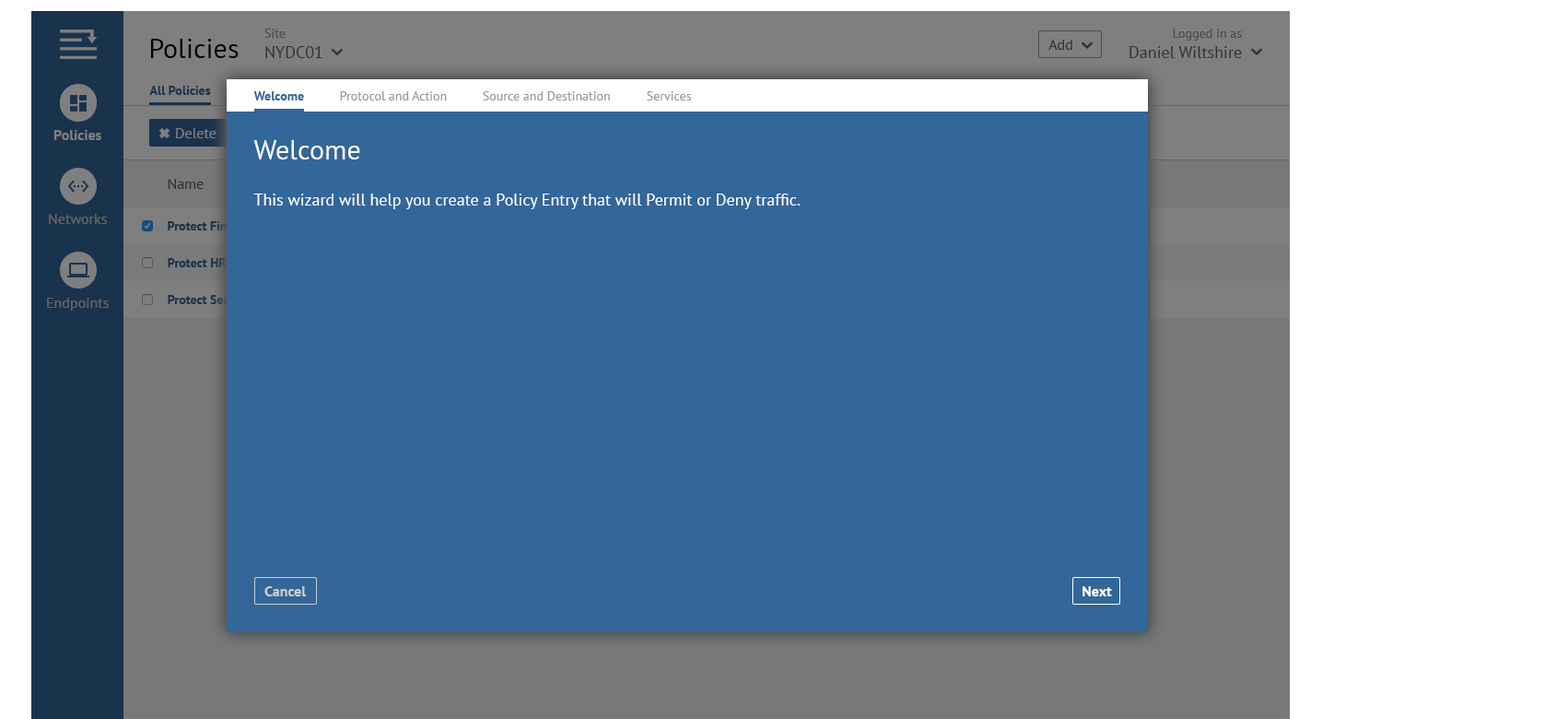
<style>
.page{position:relative;width:1568px;height:719px;background:#336699}
.page>*{position:absolute;margin:0}
.t1{font:16.6px "PTSans-Regular"}
.t2{font:12.9px "PTSans-Regular"}
.t3{font:16.8px "PTSans-Regular"}
.t4{font:13.1px "PTSans-Regular"}
.t5{font:27.6px "PTSans-Regular";color:#000000}
.t6{font:14.7px "PTSans-Regular";color:#333333}
.t7{font:12.8px "PTSans-Bold";color:#19334c}
.t8{font:12.8px "PTSans-Bold";color:#336699}
.t9{font:12.8px "PTSans-Regular";color:#999999}
.t10{font:14.7px "PTSans-Bold";color:#7f7f7f}
.t11{font:14.7px "PTSans-Regular";color:#7f7f7f}
.t12{font:27.6px "PTSans-Regular";color:#ffffff}
.t13{font:16.6px "PTSans-Regular";color:#ffffff}
.t14{font:14.7px "PTSans-Regular";color:#666666}
.t15{font:12.9px "PTSans-Bold"}
.t16{font:12.9px "PTSans-Bold";color:#19334c}
.t17{font:14.7px "PTSans-Bold";color:#cccccc}
.t18{font:14.7px "PTSans-Bold";color:#ffffff}
</style>
<div class="page">
<p class="t1" style="left:264px;top:29px;width:58px;height:29px"><span class="t2">Site<br></span>NYDC01</p>
<p class="t3" style="left:1129px;top:29px;width:113px;height:29px;text-align:right"><span class="t4">Logged in as<br></span>Daniel Wiltshire</p>
<p class="t5" style="left:151px;top:39px;width:88px;height:19px">Policies</p>
<p class="t6" style="left:1048px;top:40px;width:24px;height:10px">Add</p>
<p class="t7" style="left:149px;top:86px;width:62px;height:9px">All Policies</p>
<p class="t8" style="left:253px;top:91px;width:51px;height:9px">Welcome</p>
<p class="t9" style="left:340px;top:91px;width:107px;height:9px">Protocol and Action</p>
<p class="t9" style="left:483px;top:91px;width:127px;height:9px">Source and Destination</p>
<p class="t9" style="left:647px;top:91px;width:45px;height:9px">Services</p>
<p class="t10" style="left:53px;top:130px;width:48px;height:10px">Policies</p>
<p class="t11" style="left:176px;top:128px;width:40px;height:10px">Delete</p>
<p class="t12" style="left:253px;top:140px;width:107px;height:19px">Welcome</p>
<p class="t6" style="left:168px;top:179px;width:36px;height:10px">Name</p>
<p class="t13" style="left:253px;top:193px;width:547px;height:16px">This wizard will help you create a Policy Entry that will Permit or Deny traffic.</p>
<p class="t14" style="left:49px;top:214px;width:58px;height:10px">Networks</p>
<p class="t15" style="left:168px;top:221px;width:84px;height:9px">Protect Finance</p>
<p class="t16" style="left:168px;top:258px;width:59px;height:9px">Protect HR</p>
<p class="t14" style="left:47px;top:298px;width:62px;height:12px">Endpoints</p>
<p class="t15" style="left:168px;top:295px;width:83px;height:9px">Protect Servers</p>
<p class="t17" style="left:264px;top:586px;width:42px;height:10px">Cancel</p>
<p class="t18" style="left:1082px;top:586px;width:30px;height:10px">Next</p>
</div>
